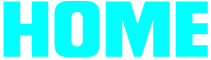
<style>
.page{position:relative;width:211px;height:60px;background:#00ffff}
.page>*{position:absolute;margin:0}
.t1{font:72px "NeographikMT";color:#00ffff}
</style>
<div class="page">
<p class="t1" style="left:3px;top:1px;width:205px;height:57px">HOME</p>
</div>
